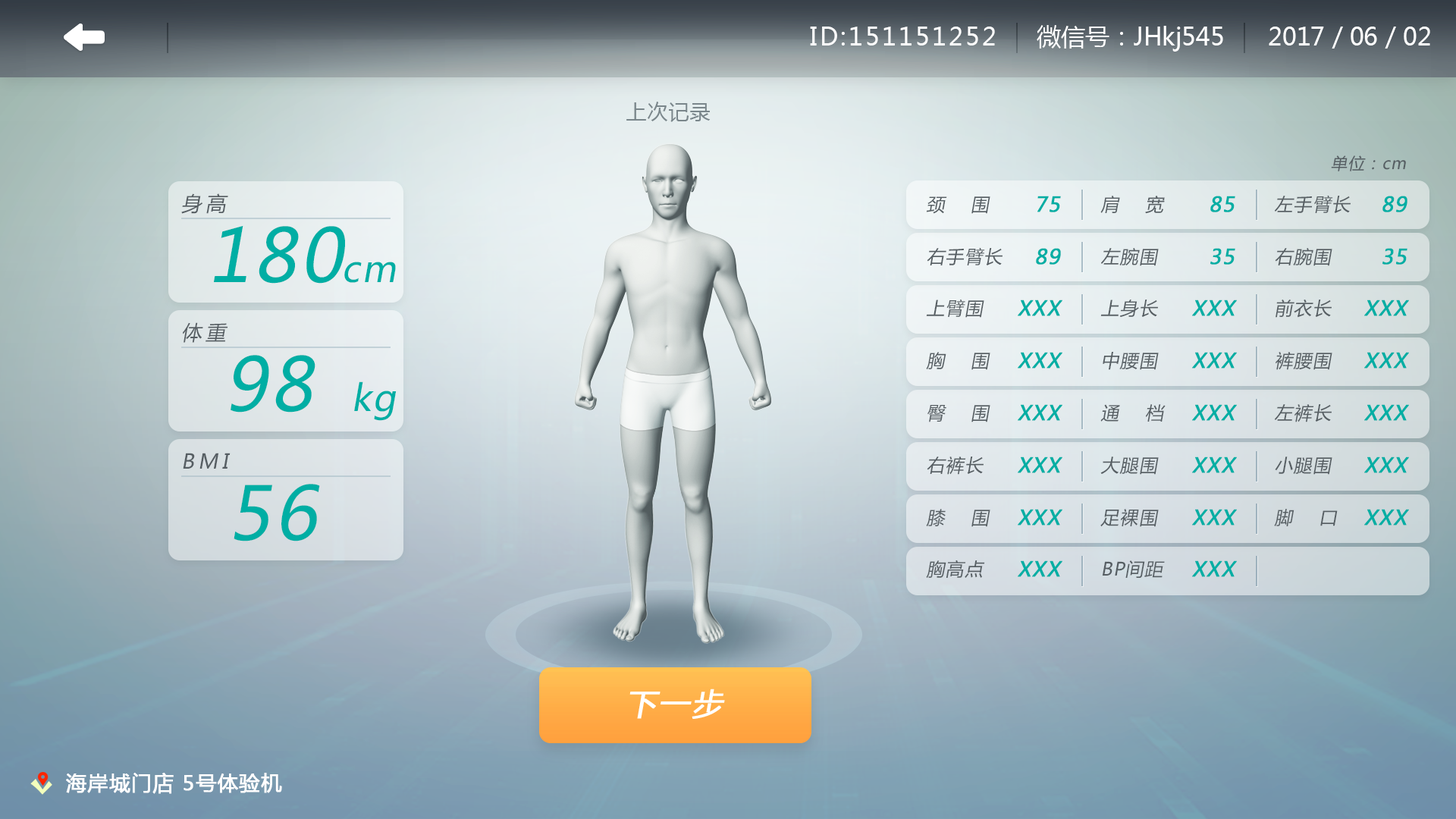
<style>
.page{position:relative;width:1456px;height:819px}
.page>*{position:absolute;margin:0}
.t1{font:24.3px "MicrosoftYaHei";letter-spacing:0.1em;color:#ffffff}
.t2{font:24.3px "MicrosoftYaHei";color:#ffffff}
.t3{font:16.2px "MicrosoftYaHei";letter-spacing:0.05em;color:#565e63;font-style:italic}
.t4{font:20.2px "MicrosoftYaHei";letter-spacing:0.2em;color:#565e63;font-style:italic}
.t5{font:18.2px "MicrosoftYaHei";letter-spacing:0.05em;color:#565e63;font-style:italic}
.t6{font:20.2px "MicrosoftYaHei";letter-spacing:0.05em;color:#00aea4;font-weight:bold;font-style:italic}
.t7{font:72.8px "MicrosoftYaHei";letter-spacing:0.05em;color:#00aea4;font-style:italic}
.t8{font:36.4px "MicrosoftYaHei";letter-spacing:0.05em;color:#00aea4;font-style:italic}
.t9{font:72.9px "MicrosoftYaHei";letter-spacing:0.05em;color:#00aea4;font-style:italic}
.t10{font:20.2px "MicrosoftYaHei";letter-spacing:0.05em;color:#ffffff;font-weight:bold}
</style>
<div class="page">
<p class="t1" style="left:810px;top:27px;width:185px;height:18px">ID:151151252</p>
<p class="t2" style="left:1037px;top:25px;width:186px;height:27px">微信号：JHkj545</p>
<p class="t2" style="left:1269px;top:27px;width:161px;height:22px">2017 / 06 / 02</p>
<p class="t3" style="left:1331px;top:155px;width:75px;height:16px">单位：cm</p>
<p class="t4" style="left:181px;top:193px;width:47px;height:21px">身高</p>
<p class="t5" style="left:926px;top:196px;width:64px;height:18px">颈    围</p>
<p class="t6" style="left:1037px;top:196px;width:24px;height:16px">75</p>
<p class="t5" style="left:1100px;top:196px;width:65px;height:18px">肩    宽</p>
<p class="t6" style="left:1210px;top:196px;width:25px;height:16px">85</p>
<p class="t5" style="left:1275px;top:195px;width:76px;height:18px">左手臂长</p>
<p class="t6" style="left:1382px;top:196px;width:25px;height:16px">89</p>
<p class="t7" style="left:214px;top:226px;width:131px;height:58px">180</p>
<p class="t5" style="left:927px;top:247px;width:76px;height:18px">右手臂长</p>
<p class="t6" style="left:1036px;top:248px;width:25px;height:17px">89</p>
<p class="t5" style="left:1101px;top:248px;width:58px;height:18px">左腕围</p>
<p class="t6" style="left:1210px;top:248px;width:25px;height:17px">35</p>
<p class="t5" style="left:1275px;top:248px;width:57px;height:18px">右腕围</p>
<p class="t6" style="left:1382px;top:248px;width:25px;height:17px">35</p>
<p class="t8" style="left:344px;top:262px;width:52px;height:21px">cm</p>
<p class="t5" style="left:926px;top:299px;width:58px;height:19px">上臂围</p>
<p class="t6" style="left:1018px;top:300px;width:44px;height:16px">XXX</p>
<p class="t5" style="left:1100px;top:300px;width:58px;height:17px">上身长</p>
<p class="t6" style="left:1192px;top:300px;width:45px;height:16px">XXX</p>
<p class="t5" style="left:1275px;top:300px;width:57px;height:18px">前衣长</p>
<p class="t6" style="left:1364px;top:300px;width:45px;height:16px">XXX</p>
<p class="t4" style="left:183px;top:322px;width:45px;height:21px">体重</p>
<p class="t5" style="left:926px;top:352px;width:64px;height:18px">胸    围</p>
<p class="t6" style="left:1018px;top:352px;width:44px;height:17px">XXX</p>
<p class="t5" style="left:1103px;top:352px;width:56px;height:18px">中腰围</p>
<p class="t6" style="left:1192px;top:352px;width:45px;height:17px">XXX</p>
<p class="t5" style="left:1275px;top:352px;width:57px;height:18px">裤腰围</p>
<p class="t6" style="left:1364px;top:352px;width:45px;height:17px">XXX</p>
<p class="t9" style="left:231px;top:355px;width:84px;height:58px">98</p>
<p class="t8" style="left:354px;top:381px;width:43px;height:40px">kg</p>
<p class="t5" style="left:927px;top:405px;width:63px;height:17px">臀    围</p>
<p class="t6" style="left:1018px;top:404px;width:44px;height:17px">XXX</p>
<p class="t5" style="left:1100px;top:404px;width:66px;height:18px">通    档</p>
<p class="t6" style="left:1192px;top:404px;width:45px;height:17px">XXX</p>
<p class="t5" style="left:1275px;top:404px;width:57px;height:18px">左裤长</p>
<p class="t6" style="left:1364px;top:404px;width:45px;height:17px">XXX</p>
<p class="t4" style="left:183px;top:453px;width:48px;height:16px">BMI</p>
<p class="t5" style="left:927px;top:457px;width:57px;height:18px">右裤长</p>
<p class="t6" style="left:1018px;top:457px;width:44px;height:16px">XXX</p>
<p class="t5" style="left:1100px;top:457px;width:59px;height:18px">大腿围</p>
<p class="t6" style="left:1192px;top:457px;width:45px;height:16px">XXX</p>
<p class="t5" style="left:1275px;top:457px;width:57px;height:18px">小腿围</p>
<p class="t6" style="left:1364px;top:457px;width:45px;height:16px">XXX</p>
<p class="t9" style="left:234px;top:484px;width:86px;height:57px">56</p>
<p class="t5" style="left:926px;top:509px;width:64px;height:18px">膝    围</p>
<p class="t6" style="left:1018px;top:509px;width:44px;height:17px">XXX</p>
<p class="t5" style="left:1100px;top:509px;width:59px;height:18px">足裸围</p>
<p class="t6" style="left:1192px;top:509px;width:45px;height:17px">XXX</p>
<p class="t5" style="left:1274px;top:509px;width:64px;height:17px">脚    口</p>
<p class="t6" style="left:1364px;top:509px;width:45px;height:17px">XXX</p>
<p class="t5" style="left:926px;top:560px;width:59px;height:18px">胸高点</p>
<p class="t6" style="left:1018px;top:560px;width:44px;height:17px">XXX</p>
<p class="t5" style="left:1102px;top:560px;width:63px;height:18px">BP间距</p>
<p class="t6" style="left:1192px;top:560px;width:45px;height:17px">XXX</p>
<p class="t10" style="left:66px;top:773px;width:216px;height:21px">海岸城门店 5号体验机</p>
</div>
